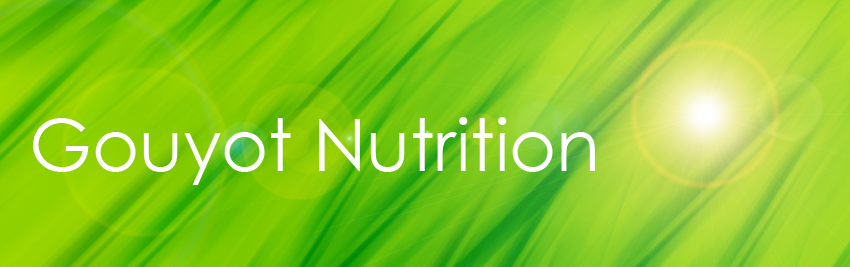
<style>
.page{position:relative;width:850px;height:267px}
.page>*{position:absolute;margin:0}
.t1{font:72px "CenturyGothic";color:#ffffff}
</style>
<div class="page">
<p class="t1" style="left:33px;top:117px;width:562px;height:68px">Gouyot Nutrition</p>
</div>
